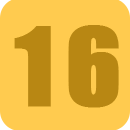
<style>
.page{position:relative;width:130px;height:130px;background:#ffcb4f}
.page>*{position:absolute;margin:0}
.t1{font:100px "Impact";letter-spacing:0.1em;color:#b88713;font-weight:bold}
</style>
<div class="page">
<p class="t1" style="left:14px;top:25px;width:105px;height:83px">16</p>
</div>
